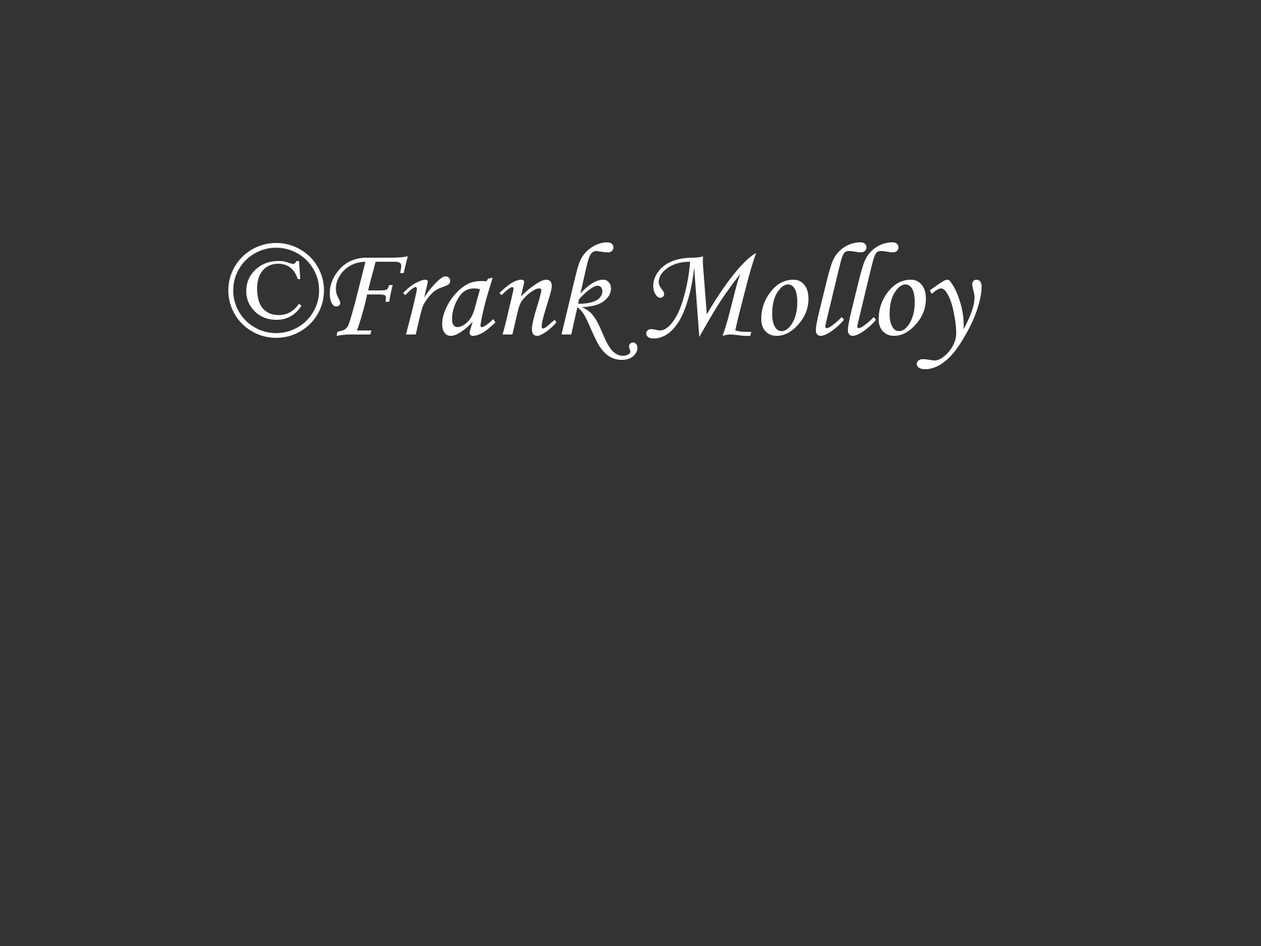
<style>
.page{position:relative;width:1261px;height:946px;background:#333333}
.page>*{position:absolute;margin:0}
.t1{font:133.5px "MonotypeCorsiva";color:#ffffff}
</style>
<div class="page">
<p class="t1" style="left:228px;top:242px;width:754px;height:127px">©Frank Molloy</p>
</div>
